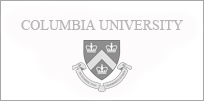
<style>
.page{position:relative;width:204px;height:101px;background:#fdfbfb}
.page>*{position:absolute;margin:0}
.t1{font:14px "IskoolaPota";color:#b7b6b6}
</style>
<div class="page">
<p class="t1" style="left:21px;top:20px;width:162px;height:10px">COLUMBIA UNIVERSITY</p>
</div>
